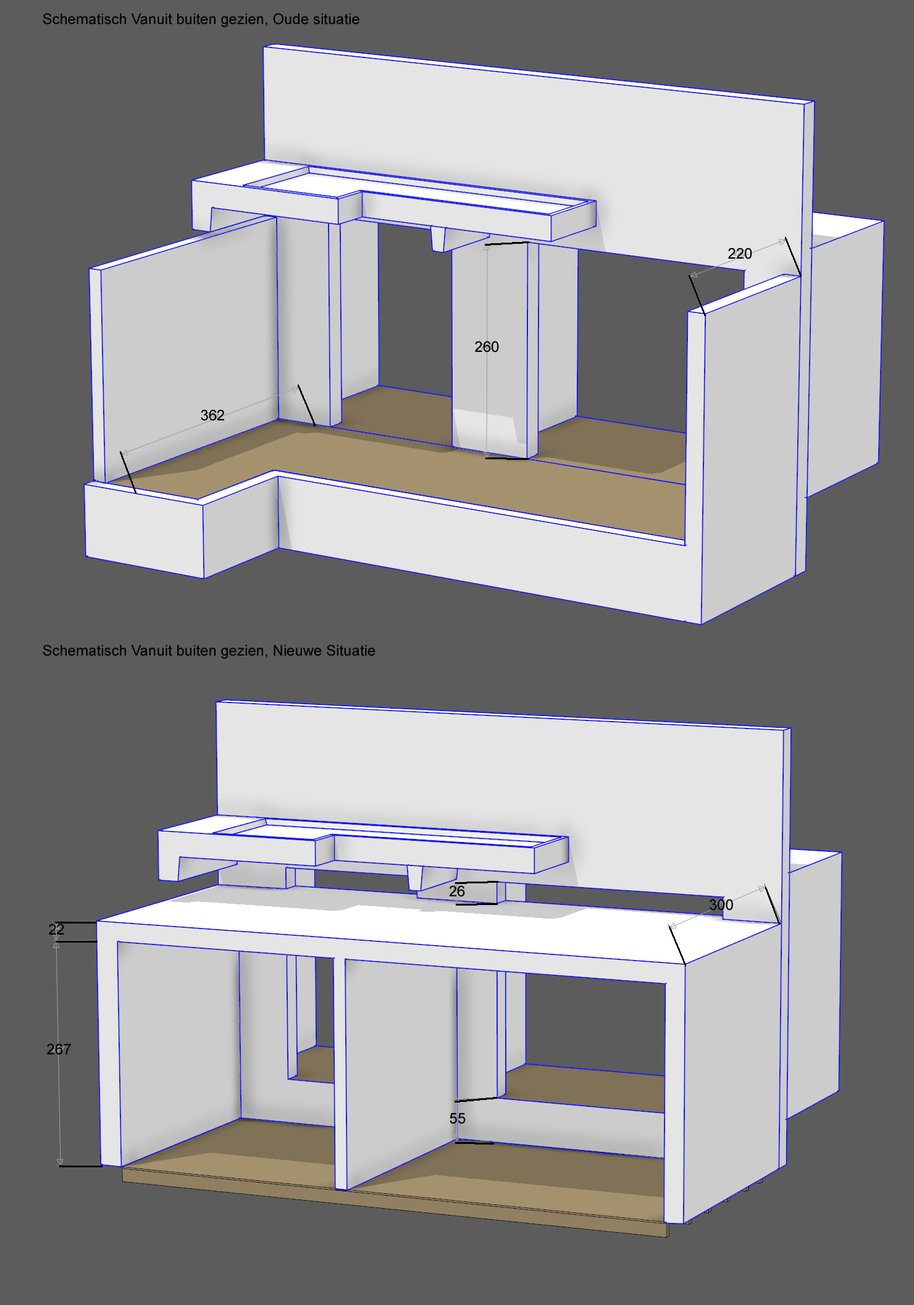
<style>
.page{position:relative;width:914px;height:1305px;background:#5c5c5c}
.page>*{position:absolute;margin:0}
.t1{font:14.8px "ArialMT";color:#000000}
</style>
<div class="page">
<p class="t1" style="left:43px;top:13px;width:316px;height:14px">Schematisch Vanuit buiten gezien, Oude situatie</p>
<p class="t1" style="left:728px;top:248px;width:24px;height:11px">220</p>
<p class="t1" style="left:475px;top:341px;width:24px;height:12px">260</p>
<p class="t1" style="left:201px;top:409px;width:23px;height:12px">362</p>
<p class="t1" style="left:43px;top:645px;width:332px;height:14px">Schematisch Vanuit buiten gezien, Nieuwe Situatie</p>
<p class="t1" style="left:449px;top:885px;width:16px;height:12px">26</p>
<p class="t1" style="left:709px;top:899px;width:24px;height:12px">300</p>
<p class="t1" style="left:49px;top:924px;width:15px;height:11px">22</p>
<p class="t1" style="left:47px;top:1043px;width:24px;height:12px">267</p>
<p class="t1" style="left:449px;top:1113px;width:16px;height:11px">55</p>
</div>
